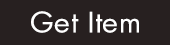
<style>
.page{position:relative;width:170px;height:45px;background:#272020}
.page>*{position:absolute;margin:0}
.t1{font:27px "LuzSans-Book";color:#ffffff;font-weight:bold;scale:1.04 1}
</style>
<div class="page">
<p class="t1" style="left:31px;top:11px;width:108px;height:22px">Get Item</p>
</div>
